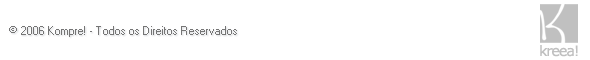
<style>
.page{position:relative;width:590px;height:60px;background:#ffffff}
.page>*{position:absolute;margin:0}
.t1{font:8px "ASI_System";color:#757575}
.t2{font:9px "ASI_System";color:#757575}
.t3{font:14.3px "Verdana";letter-spacing:-0.075em;color:#c0c0c0}
</style>
<div class="page">
<p class="t1" style="left:9px;top:26px;width:228px;height:11px"><span class="t2">© </span>2006 Kompre! - Todos os Direitos Reservados</p>
<p class="t3" style="left:540px;top:45px;width:38px;height:12px">kreea!</p>
</div>
